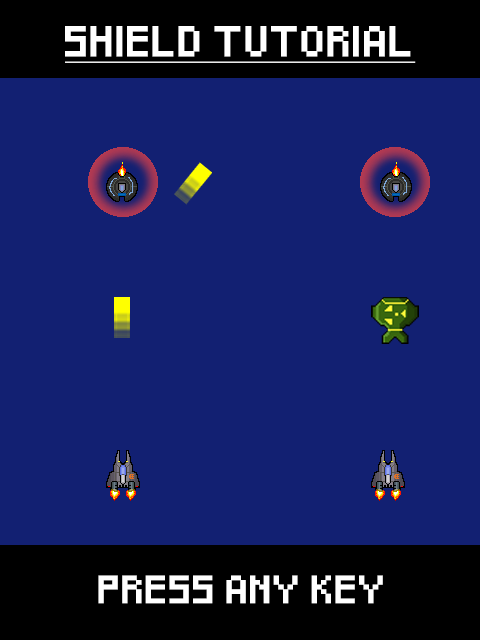
<style>
.page{position:relative;width:480px;height:640px;background:#122072}
.page>*{position:absolute;margin:0}
.t1{font:25px "Pixeled";color:#ffffff;font-weight:bold;text-decoration:underline}
.t2{font:23px "Pixeled";color:#ffffff;font-weight:bold}
</style>
<div class="page">
<p class="t1" style="left:65px;top:26px;width:351px;height:37px">SHIELD TUTORIAL</p>
<p class="t2" style="left:98px;top:575px;width:285px;height:29px">PRESS ANY KEY</p>
</div>
